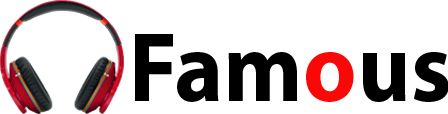
<style>
.page{position:relative;width:448px;height:114px;background:#ffffff}
.page>*{position:absolute;margin:0}
.t1{font:99.1px "MyriadPro-Bold";color:#000000;scale:0.94 1}
.t2{font:99.1px "MyriadPro-Bold";color:#fa0808;scale:0.94 1}
</style>
<div class="page">
<p class="t1" style="left:135px;top:34px;width:314px;height:68px">Fam<span class="t2">o</span>us</p>
</div>
